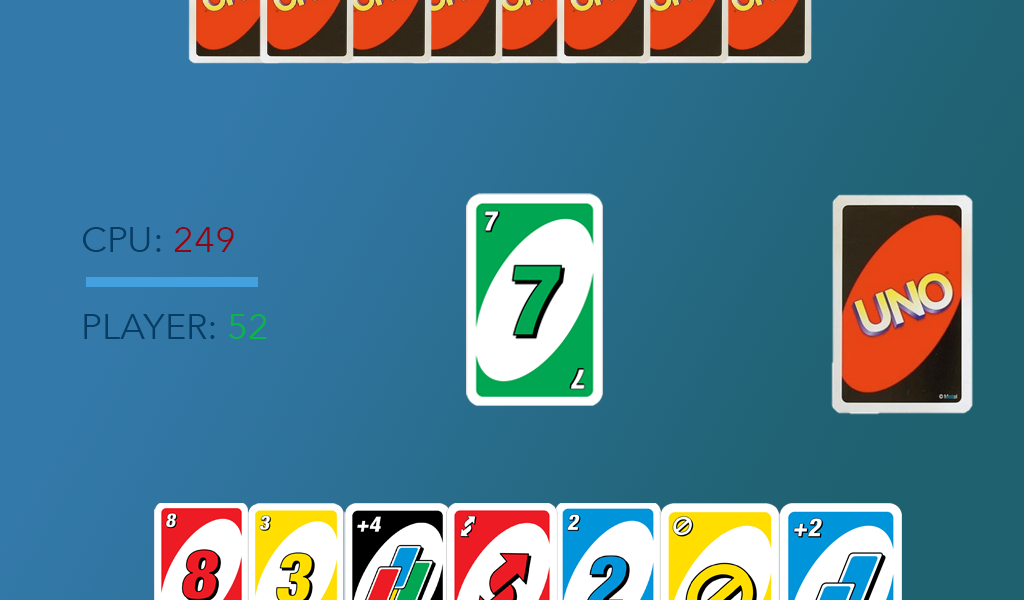
<style>
.page{position:relative;width:1024px;height:600px}
.page>*{position:absolute;margin:0}
.t1{font:36px "AvenirNext-Regular";color:#053d64}
.t2{font:36px "AvenirNext-Regular";color:#8c0817}
.t3{font:36px "AvenirNext-Regular";color:#0db448}
</style>
<div class="page">
<p class="t1" style="left:83px;top:227px;width:184px;height:112px">CPU: <span class="t2">249<br></span><br>PLAYER: <span class="t3">52</span></p>
</div>
